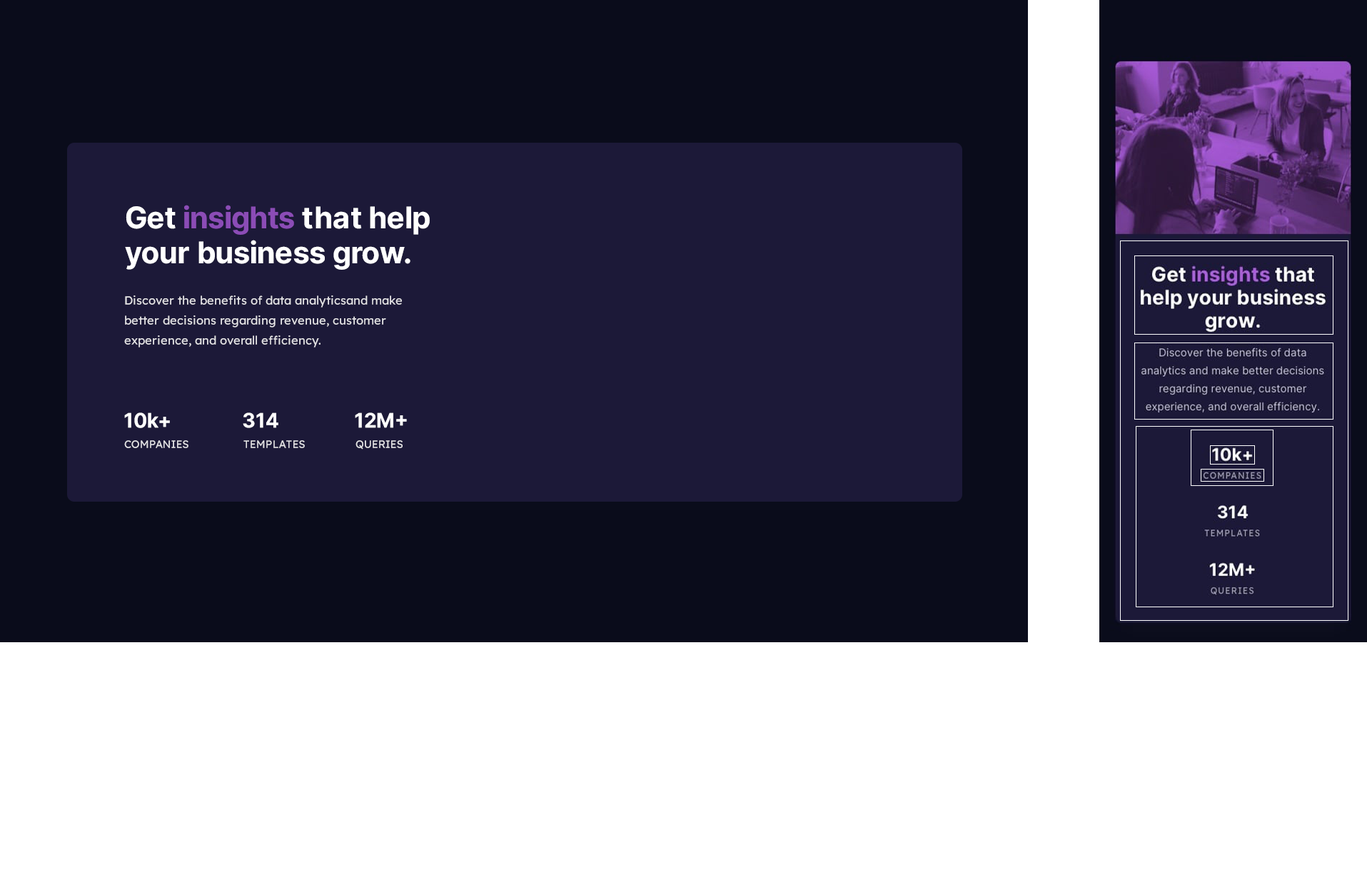
<style>
.page{position:relative;width:1367px;height:872px;background:#ffffff}
.page>*{position:absolute;margin:0}
.t1{font:30px/35px "Inter-Bold";letter-spacing:-0.005em;color:#ffffff}
.t2{font:30px/35px "Inter-Bold";letter-spacing:-0.005em;color:#8b4cb6}
.t3{font:11.8px/20px "LexendDeca-Regular";color:#e4e3e6}
.t4{font:20.2px "Inter-Bold";letter-spacing:-0.005em;color:#ffffff}
.t5{font:10.7px "LexendDeca-Regular";letter-spacing:-0.005em;color:#e4e3e6}
</style>
<div class="page">
<p class="t1" style="left:125px;top:205px;width:305px;height:65px">Get <span class="t2">insights</span> that help <br>your business grow.</p>
<p class="t3" style="left:124px;top:296px;width:278px;height:52px">Discover the benefits of data analyticsand make <br>better decisions regarding revenue, customer<br>experience, and overall efficiency.</p>
<p class="t4" style="left:124px;top:413px;width:46px;height:15px">10k+</p>
<p class="t4" style="left:243px;top:413px;width:35px;height:15px">314</p>
<p class="t4" style="left:355px;top:413px;width:52px;height:15px">12M+</p>
<p class="t5" style="left:124px;top:440px;width:64px;height:8px">COMPANIES</p>
<p class="t5" style="left:243px;top:440px;width:62px;height:8px">TEMPLATES</p>
<p class="t5" style="left:355px;top:440px;width:48px;height:10px">QUERIES</p>
</div>
